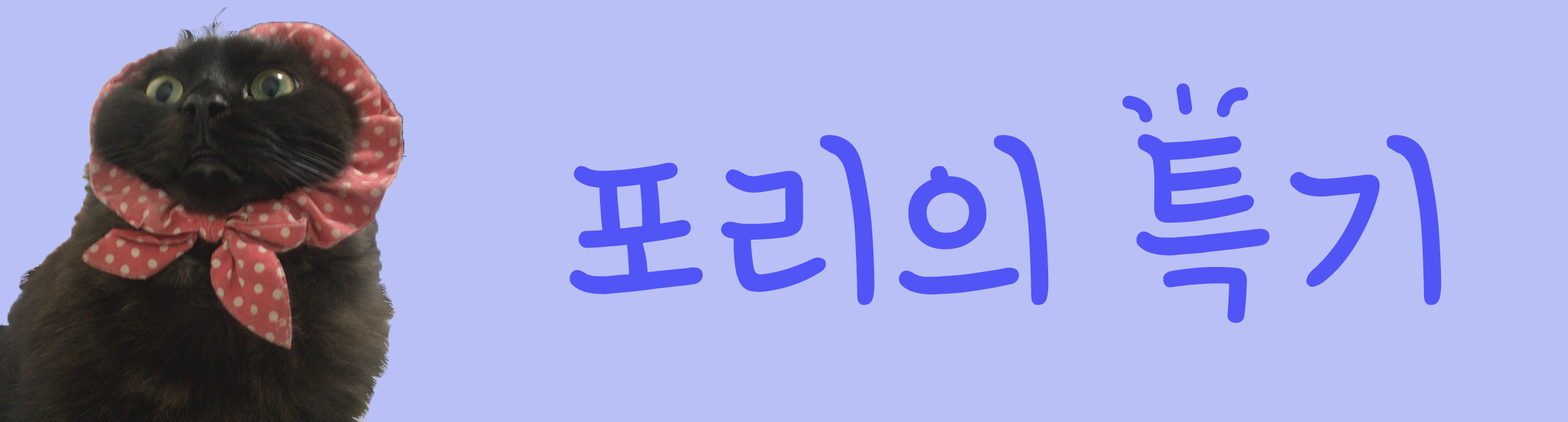
<style>
.page{position:relative;width:1568px;height:422px;background:#b9c0f5}
.page>*{position:absolute;margin:0}
.t1{font:195.4px "HoonLefthanderR";color:#5155f5}
</style>
<div class="page">
<p class="t1" style="left:569px;top:134px;width:873px;height:189px">포리의 특기</p>
</div>
